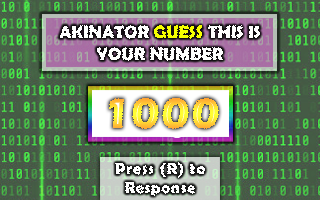
<style>
.page{position:relative;width:320px;height:200px}
.page>*{position:absolute;margin:0}
.t1{font:18px "BerlinSansFBDemi-Bold";color:#ffffff}
.t2{font:18px "BerlinSansFBDemi-Bold";color:#f6ff00}
.t3{font:44px "ErasITC-Bold";letter-spacing:0.025em}
.t4{font:16px "BerlinSansFBDemi-Bold";letter-spacing:0.05em;color:#ffffff}
</style>
<div class="page">
<p class="t1" style="left:59px;top:25px;width:201px;height:36px;text-align:center">AKINATOR <span class="t2">GUESS </span>THIS IS<br>YOUR NUMBER</p>
<p class="t3" style="left:109px;top:98px;width:110px;height:31px">1000</p>
<p class="t4" style="left:115px;top:162px;width:90px;height:34px;text-align:center">Press (R) to <br>Response</p>
</div>
